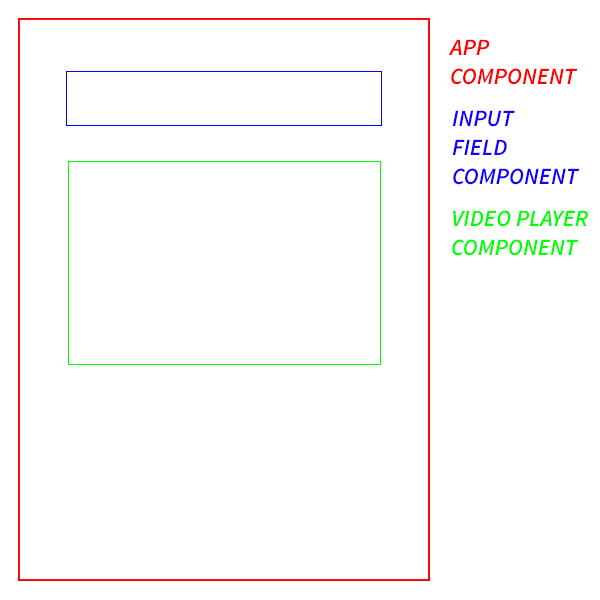
<style>
.page{position:relative;width:600px;height:600px;background:#ffffff}
.page>*{position:absolute;margin:0}
.t1{font:23.4px/24px "SourceSansPro-SemiboldIt";color:#ff0000;text-transform:uppercase}
.t2{font:23.4px/24px "SourceSansPro-SemiboldIt";color:#1200ff;text-transform:uppercase}
.t3{font:23.4px/24px "SourceSansPro-SemiboldIt";color:#00ff00;text-transform:uppercase}
</style>
<div class="page">
<p class="t1" style="left:448px;top:39px;width:130px;height:46px">App<br>component</p>
<p class="t2" style="left:452px;top:110px;width:128px;height:75px">INput<br>field <br>component</p>
<p class="t3" style="left:452px;top:210px;width:136px;height:46px">video player<br>component</p>
</div>
